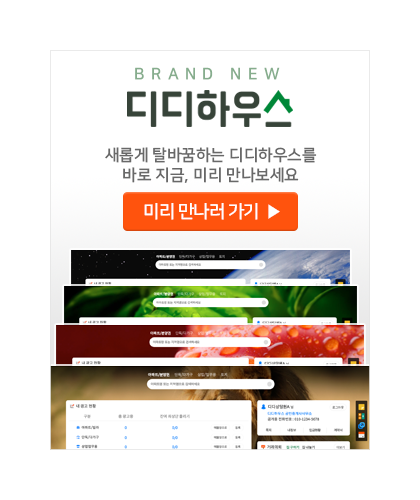
<style>
.page{position:relative;width:420px;height:500px;background:#ffffff}
.page>*{position:absolute;margin:0}
.t1{font:16px "NanumSquareOTFB";letter-spacing:0.4em;color:#86ad8d}
.t2{font:16px/20px "NanumSquareOTFB";color:#686868}
.t3{font:18px "NanumSquareOTFB";letter-spacing:-0.05em;color:#fffffe}
</style>
<div class="page">
<p class="t1" style="left:135px;top:67px;width:145px;height:13px">BRAND NEW</p>
<p class="t2" style="left:105px;top:147px;width:212px;height:36px;text-align:center">새롭게 탈바꿈하는 디디하우스를<br>바로 지금, 미리 만나보세요</p>
<p class="t3" style="left:144px;top:203px;width:136px;height:17px">미리 만나러 가기  ▶︎</p>
</div>
